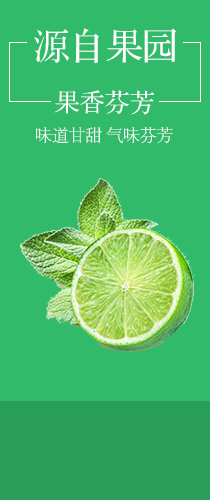
<style>
.page{position:relative;width:210px;height:500px;background:#30ba69}
.page>*{position:absolute;margin:0}
.t1{font:36.5px "FZS3JW--GB1-0";color:#ffffff}
.t2{font:25px "FZS3JW--GB1-0";color:#ffffff}
.t3{font:16.7px "FZSYJW--GB1-0";color:#ffffff}
</style>
<div class="page">
<p class="t1" style="left:34px;top:28px;width:142px;height:36px">源自果园</p>
<p class="t2" style="left:54px;top:90px;width:100px;height:25px">果香芬芳</p>
<p class="t3" style="left:36px;top:127px;width:137px;height:17px">味道甘甜 气味芬芳</p>
</div>
